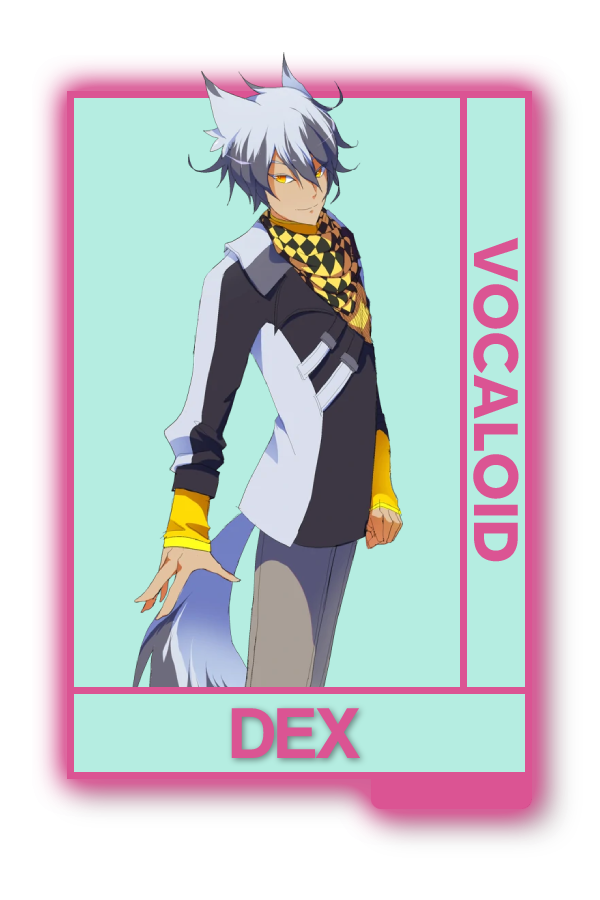
<style>
.page{position:relative;width:600px;height:900px;background:#b5ede1}
.page>*{position:absolute;margin:0}
.t1{font:62.5px "MADETOMMY-Bold";color:#db5493}
.t2{font:75px "CoolveticaRg-Regular";color:#db5493}
</style>
<div class="page">
<p class="t1" style="left:473px;top:237px;width:46px;height:325px;rotate:90deg">VOCALOID</p>
<p class="t2" style="left:231px;top:708px;width:130px;height:50px">DEX</p>
</div>
